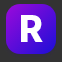
<style>
.page{position:relative;width:62px;height:62px}
.page>*{position:absolute;margin:0}
.t1{font:36px "NotoSansKR-Black";color:#ffffff;text-transform:uppercase}
</style>
<div class="page">
<p class="t1" style="left:21px;top:15px;width:22px;height:27px">r</p>
</div>
